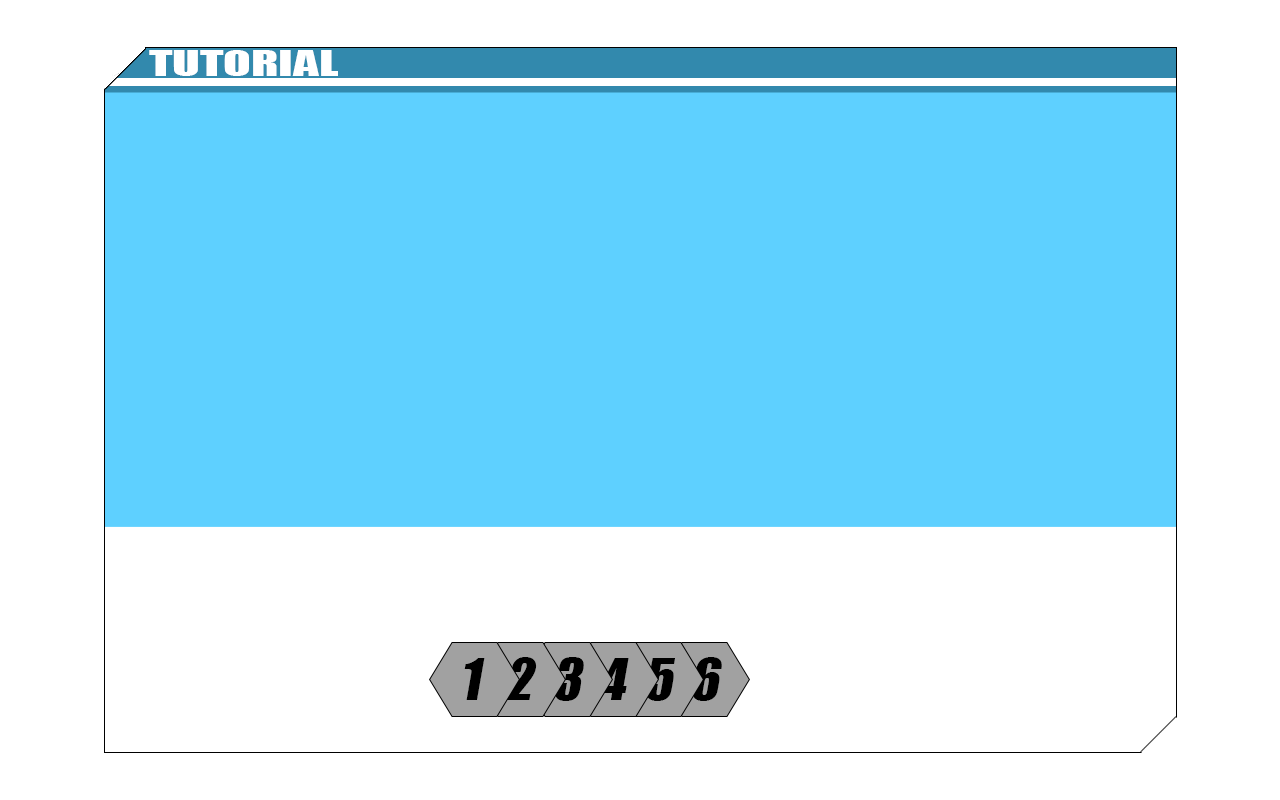
<style>
.page{position:relative;width:1280px;height:800px;background:#ffffff}
.page>*{position:absolute;margin:0}
.t1{font:53.3px "Impact";color:#000000;font-style:italic}
</style>
<div class="page">
<p class="t1" style="left:464px;top:658px;width:21px;height:42px">1</p>
<p class="t1" style="left:506px;top:657px;width:31px;height:43px">2</p>
<p class="t1" style="left:555px;top:657px;width:29px;height:44px">3</p>
<p class="t1" style="left:599px;top:658px;width:30px;height:42px">4</p>
<p class="t1" style="left:646px;top:658px;width:29px;height:43px">5</p>
<p class="t1" style="left:692px;top:657px;width:30px;height:44px">6</p>
</div>
